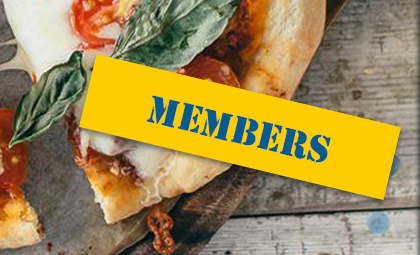
<style>
.page{position:relative;width:420px;height:255px}
.page>*{position:absolute;margin:0}
.t1{font:40px "Stencil";color:#065a8f}
</style>
<div class="page">
<p class="t1" style="left:146px;top:95px;width:185px;height:68px;rotate:14deg">MEMBERS</p>
</div>
